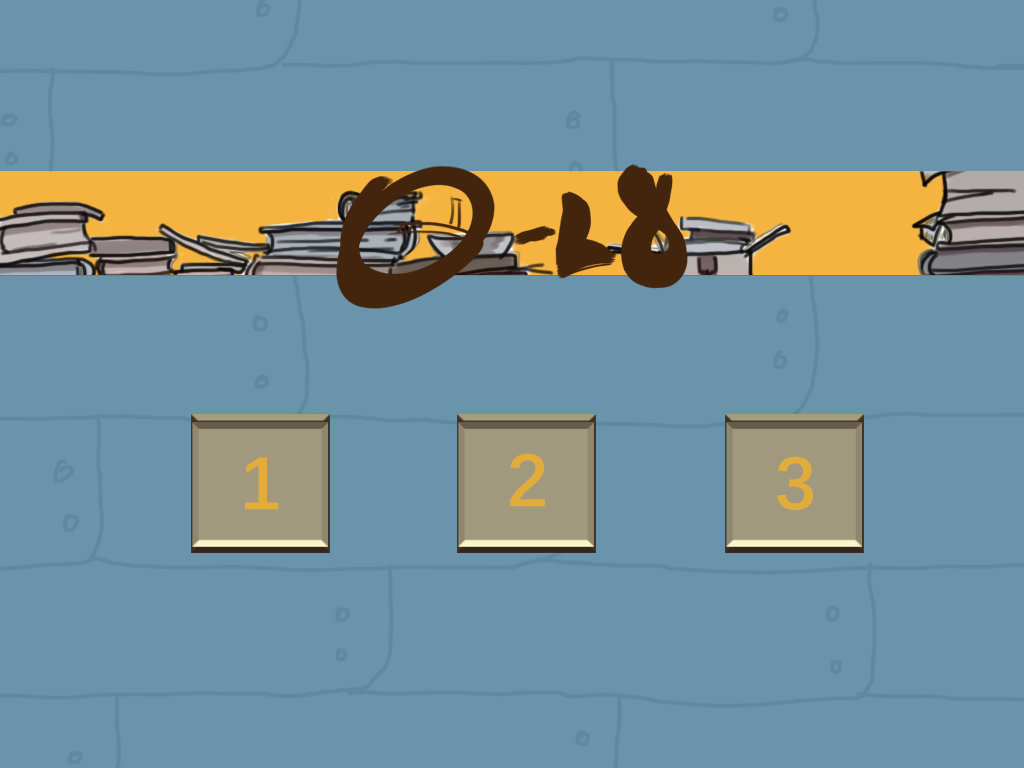
<style>
.page{position:relative;width:1024px;height:768px;background:#6994ab}
.page>*{position:absolute;margin:0}
.t1{font:75px "DengXian-Bold";color:#e1ac3a}
</style>
<div class="page">
<p class="t1" style="left:245px;top:457px;width:34px;height:53px">1</p>
<p class="t1" style="left:510px;top:453px;width:35px;height:54px">2</p>
<p class="t1" style="left:777px;top:456px;width:36px;height:54px">3</p>
</div>
